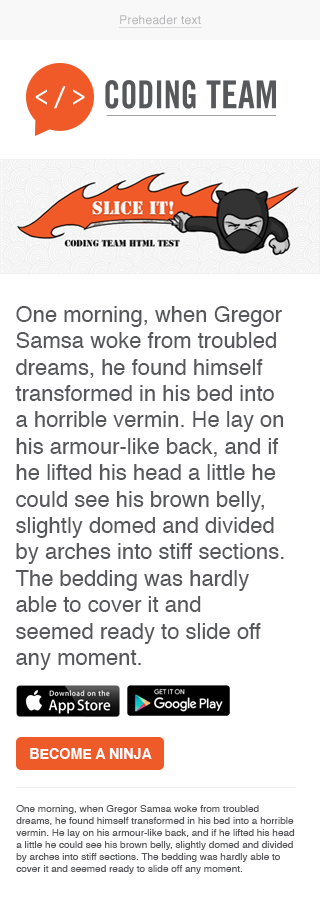
<style>
.page{position:relative;width:320px;height:905px;background:#ffffff}
.page>*{position:absolute;margin:0}
.t1{font:12px "Helvetica";letter-spacing:0.02em;color:#b5b5b7;text-decoration:underline}
.t2{font:22px "Helvetica";color:#57585b}
.t3{font:14.3px "Helvetica-Bold";color:#ffffff}
.t4{font:10px "Helvetica";color:#57585b}
</style>
<div class="page">
<p class="t1" style="left:119px;top:15px;width:83px;height:13px">Preheader text</p>
<p class="t2" style="left:15px;top:306px;width:269px;height:364px">One morning, when Gregor Samsa woke from troubled dreams, he found himself transformed in his bed into a horrible vermin. He lay on his armour-like back, and if he lifted his head a little he could see his brown belly, slightly domed and divided by arches into stiff sections. The bedding was hardly able to cover it and seemed ready to slide off any moment.</p>
<p class="t3" style="left:30px;top:748px;width:122px;height:11px">BECOME A NINJA</p>
<p class="t4" style="left:16px;top:805px;width:279px;height:69px">One morning, when Gregor Samsa woke from troubled dreams, he found himself transformed in his bed into a horrible vermin. He lay on his armour-like back, and if he lifted his head a little he could see his brown belly, slightly domed and divided by arches into stiff sections. The bedding was hardly able to cover it and seemed ready to slide off any moment.</p>
</div>
